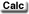
<style>
.page{position:relative;width:29px;height:14px;background:#ffffff}
.page>*{position:absolute;margin:0}
.t1{font:10px "Helvetica-Bold";color:#000000}
</style>
<div class="page">
<p class="t1" style="left:3px;top:1px;width:21px;height:8px">Calc</p>
</div>
